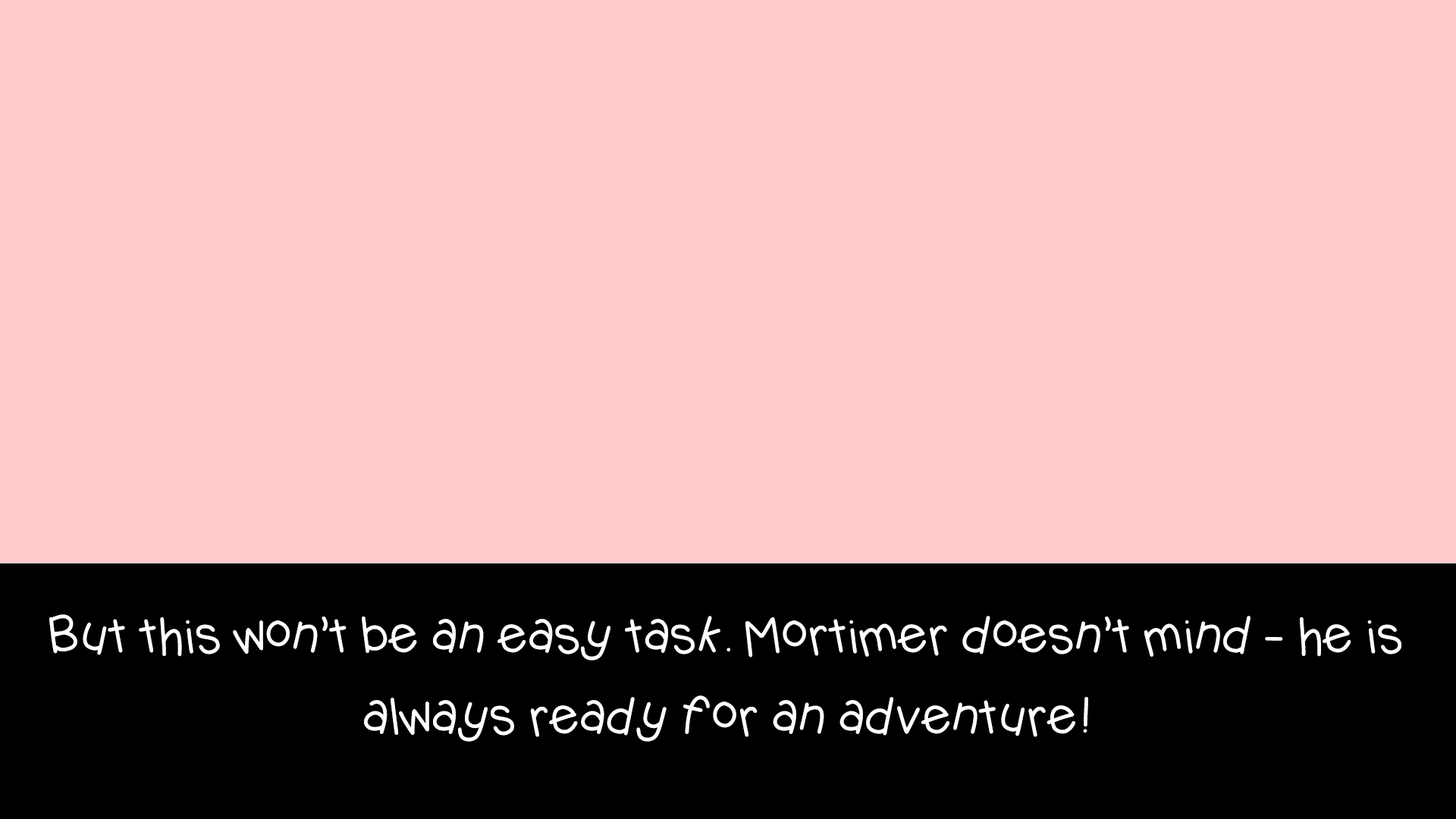
<style>
.page{position:relative;width:1456px;height:819px;background:#ffcbcb}
.page>*{position:absolute;margin:0}
.t1{font:49.1px/81.1px "KBJellybean";letter-spacing:-0.04em;color:#ffffff}
</style>
<div class="page">
<p class="t1" style="left:49px;top:614px;width:1352px;height:128px;text-align:center">But this won’t be an easy task. Mortimer doesn’t mind - he is always ready for an adventure!</p>
</div>
